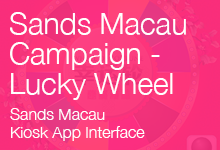
<style>
.page{position:relative;width:220px;height:150px}
.page>*{position:absolute;margin:0}
.t1{font:30px/30px "HelveticaNeue-Light";color:#ffffff}
.t2{font:16px/18px "HelveticaNeue-Light";color:#ffffff}
</style>
<div class="page">
<p class="t1" style="left:10px;top:12px;width:176px;height:88px">Sands Macau <br>Campaign -<br>Lucky Wheel</p>
<p class="t2" style="left:10px;top:108px;width:135px;height:33px">Sands Macau<br>Kiosk App Interface</p>
</div>
